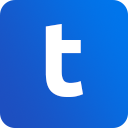
<style>
.page{position:relative;width:128px;height:128px}
.page>*{position:absolute;margin:0}
.t1{font:106.3px "Ubuntu-Bold";color:#ffffff}
</style>
<div class="page">
<p class="t1" style="left:45px;top:24px;width:38px;height:73px">t</p>
</div>
